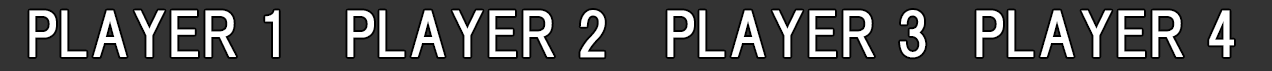
<style>
.page{position:relative;width:1272px;height:71px;background:#333333}
.page>*{position:absolute;margin:0}
.t1{font:58.3px "HGPGothicE";color:#ffffff}
</style>
<div class="page">
<p class="t1" style="left:29px;top:10px;width:250px;height:47px">PLAYER 1</p>
<p class="t1" style="left:347px;top:10px;width:258px;height:48px">PLAYER 2</p>
<p class="t1" style="left:667px;top:10px;width:259px;height:48px">PLAYER 3</p>
<p class="t1" style="left:976px;top:10px;width:258px;height:47px">PLAYER 4</p>
</div>
